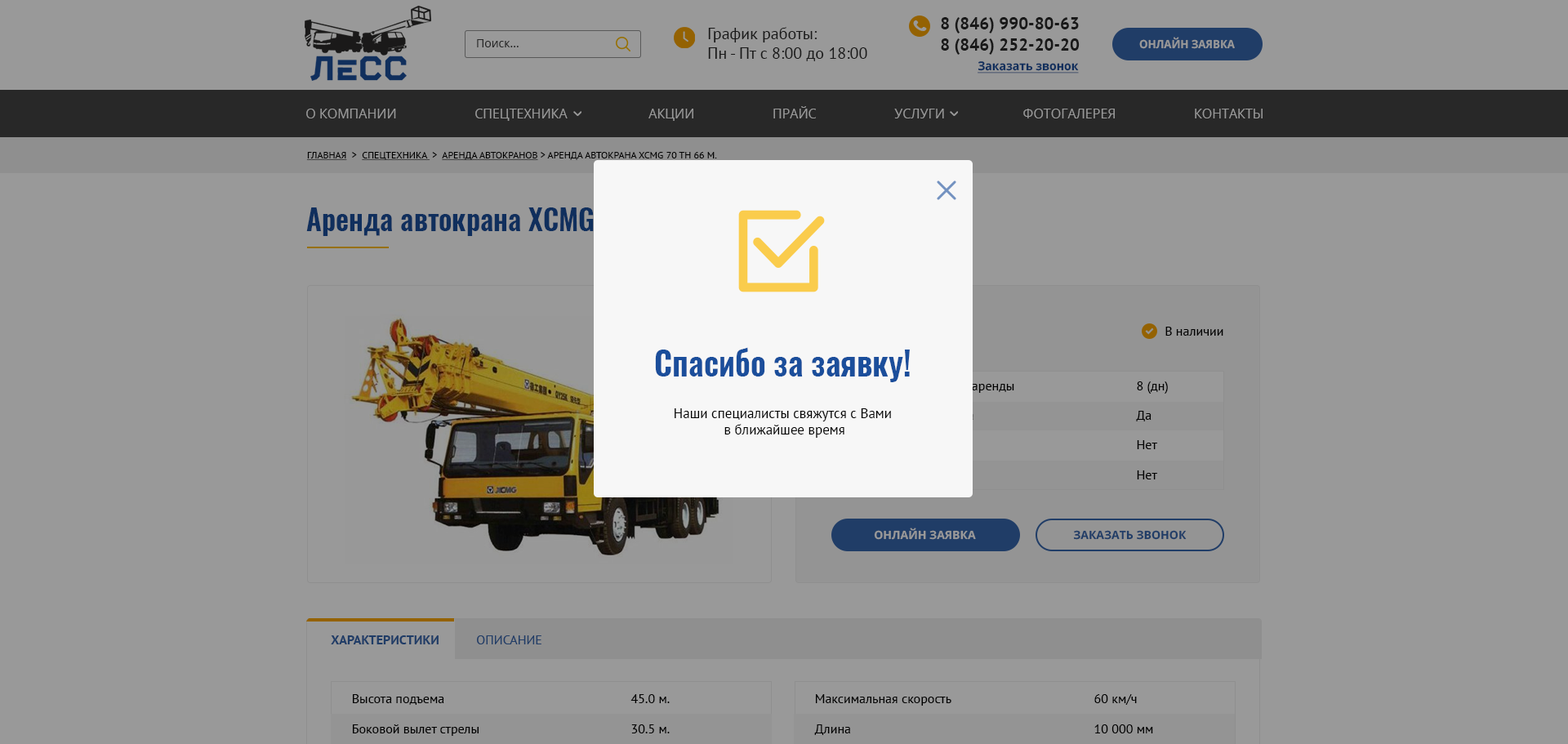
<style>
.page{position:relative;width:1568px;height:744px;background:#999999}
.page>*{position:absolute;margin:0}
.t1{font:17.1px/21.2px "PTSans-Bold";color:#2a2a2a}
.t2{font:16.3px "PTSans-Regular";color:#2a2a2a}
.t3{font:11.4px "OpenSans";color:#282828}
.t4{font:11.4px "OpenSans-Bold";color:#999999;text-transform:uppercase;scale:0.94 1}
.t5{font:12.2px "OpenSans-Bold";color:#102f5d;text-decoration:underline;scale:0.94 1}
.t6{font:13.1px "OpenSans";color:#999999;text-transform:uppercase}
.t7{font:9.8px "PTSans-Regular";color:#000000;text-transform:uppercase}
.t8{font:9.8px "PTSans-Regular";color:#000000;text-transform:uppercase;text-decoration:underline}
.t9{font:28.6px "Oswald-DemiBold";color:#102f5d}
.t10{font:13.1px "PTSans-Regular";color:#000000}
.t11{font:32.7px "Oswald-DemiBold";color:#1b4e9b}
.t12{font:13.9px "PTSans-Regular";color:#000000}
.t13{font:11.4px "OpenSans-Bold";color:#999999;text-transform:uppercase}
.t14{font:11.4px "OpenSans-Bold";color:#203d67;text-transform:uppercase}
.t15{font:13.1px "PTSans-Bold";color:#203d67;text-transform:uppercase}
.t16{font:13.1px "PTSans-Regular";color:#203d67;text-transform:uppercase}
</style>
<div class="page">
<p class="t1" style="left:941px;top:17px;width:139px;height:38px">8 (846) 990-80-63<br>8 (846) 252-20-20</p>
<p class="t2" style="left:708px;top:27px;width:159px;height:34px">График работы:<br>Пн - Пт с 8:00 до 18:00</p>
<p class="t3" style="left:477px;top:39px;width:42px;height:8px">Поиск...</p>
<p class="t4" style="left:1139px;top:37px;width:96px;height:12px">онлайн заявка</p>
<p class="t5" style="left:978px;top:61px;width:101px;height:13px">Заказать звонок</p>
<p class="t6" style="left:306px;top:106px;width:957px;height:15px">О компании                       Спецтехника                        АКЦИИ                       Прайс                       Услуги                       Фотогалерея                       Контакты</p>
<p class="t7" style="left:306px;top:152px;width:411px;height:8px"><span class="t8">Главная</span>  &gt;  <span class="t8">Спецтехника </span> &gt;  <span class="t8">аренда автокранов</span> &gt; Аренда Автокрана XCMG 70 тн 66 м.</p>
<p class="t9" style="left:306px;top:207px;width:423px;height:29px">Аренда автокрана XCMG 70 тн 66 м.</p>
<p class="t10" style="left:1165px;top:327px;width:58px;height:9px">В наличии</p>
<p class="t11" style="left:655px;top:347px;width:255px;height:35px">Спасибо за заявку!</p>
<p class="t10" style="left:1137px;top:381px;width:31px;height:13px">8 (дн)</p>
<p class="t12" style="left:675px;top:408px;width:216px;height:30px;text-align:center">Наши специалисты свяжутся с Вами <br>в ближайшее время</p>
<p class="t10" style="left:1136px;top:411px;width:16px;height:10px">Да</p>
<p class="t10" style="left:1137px;top:440px;width:20px;height:9px">Нет</p>
<p class="t10" style="left:1137px;top:470px;width:20px;height:9px">Нет</p>
<p class="t13" style="left:874px;top:528px;width:102px;height:12px">Онлайн заявка</p>
<p class="t14" style="left:1073px;top:530px;width:114px;height:10px">Заказать звонок</p>
<p class="t15" style="left:331px;top:635px;width:108px;height:9px">Характеристики</p>
<p class="t16" style="left:477px;top:635px;width:64px;height:9px">Описание</p>
<p class="t10" style="left:353px;top:694px;width:91px;height:11px">Высота подъема</p>
<p class="t10" style="left:630px;top:694px;width:40px;height:9px">45.0 м.</p>
<p class="t10" style="left:816px;top:694px;width:135px;height:12px">Максимальная скорость</p>
<p class="t10" style="left:1094px;top:694px;width:43px;height:11px">60 км/ч</p>
<p class="t10" style="left:353px;top:724px;width:126px;height:12px">Боковой вылет стрелы</p>
<p class="t10" style="left:631px;top:724px;width:39px;height:9px">30.5 м.</p>
<p class="t10" style="left:814px;top:724px;width:36px;height:11px">Длина</p>
<p class="t10" style="left:1094px;top:724px;width:59px;height:9px">10 000 мм</p>
</div>
